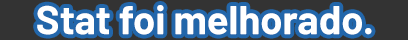
<style>
.page{position:relative;width:408px;height:40px;background:#333333}
.page>*{position:absolute;margin:0}
.t1{font:40px "Barlow-Bold";color:#ffffff}
</style>
<div class="page">
<p class="t1" style="left:37px;top:5px;width:335px;height:30px">Stat foi melhorado.</p>
</div>
